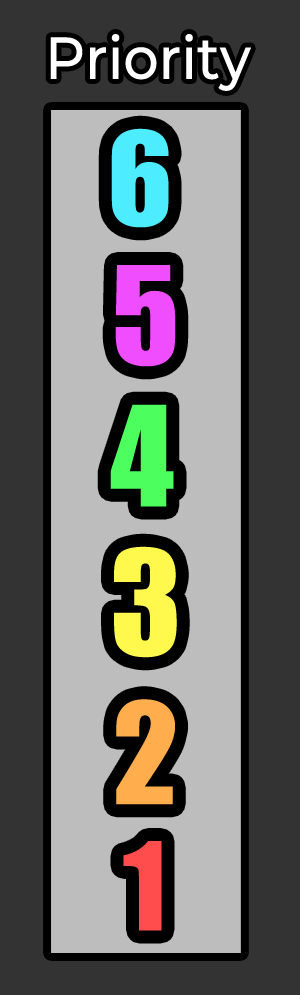
<style>
.page{position:relative;width:300px;height:995px;background:#333333}
.page>*{position:absolute;margin:0}
.t1{font:59.2px "Montserrat-Medium";color:#ffffff;scale:0.94 1}
.t2{font:119.7px "Impact";color:#4decff}
.t3{font:125.6px "Impact";color:#f04dff}
.t4{font:128.5px "Impact";color:#4dff5e}
.t5{font:134px "Impact";color:#fff94d}
.t6{font:130px "Impact";color:#ffad4d}
.t7{font:112.9px "Impact";color:#ff4d4d}
</style>
<div class="page">
<p class="t1" style="left:50px;top:34px;width:201px;height:57px">Priority</p>
<p class="t2" style="left:111px;top:128px;width:58px;height:100px">6</p>
<p class="t3" style="left:115px;top:265px;width:61px;height:102px">5</p>
<p class="t4" style="left:110px;top:404px;width:64px;height:103px">4</p>
<p class="t5" style="left:114px;top:546px;width:63px;height:112px">3</p>
<p class="t6" style="left:116px;top:699px;width:59px;height:106px">2</p>
<p class="t7" style="left:123px;top:841px;width:39px;height:90px">1</p>
</div>
